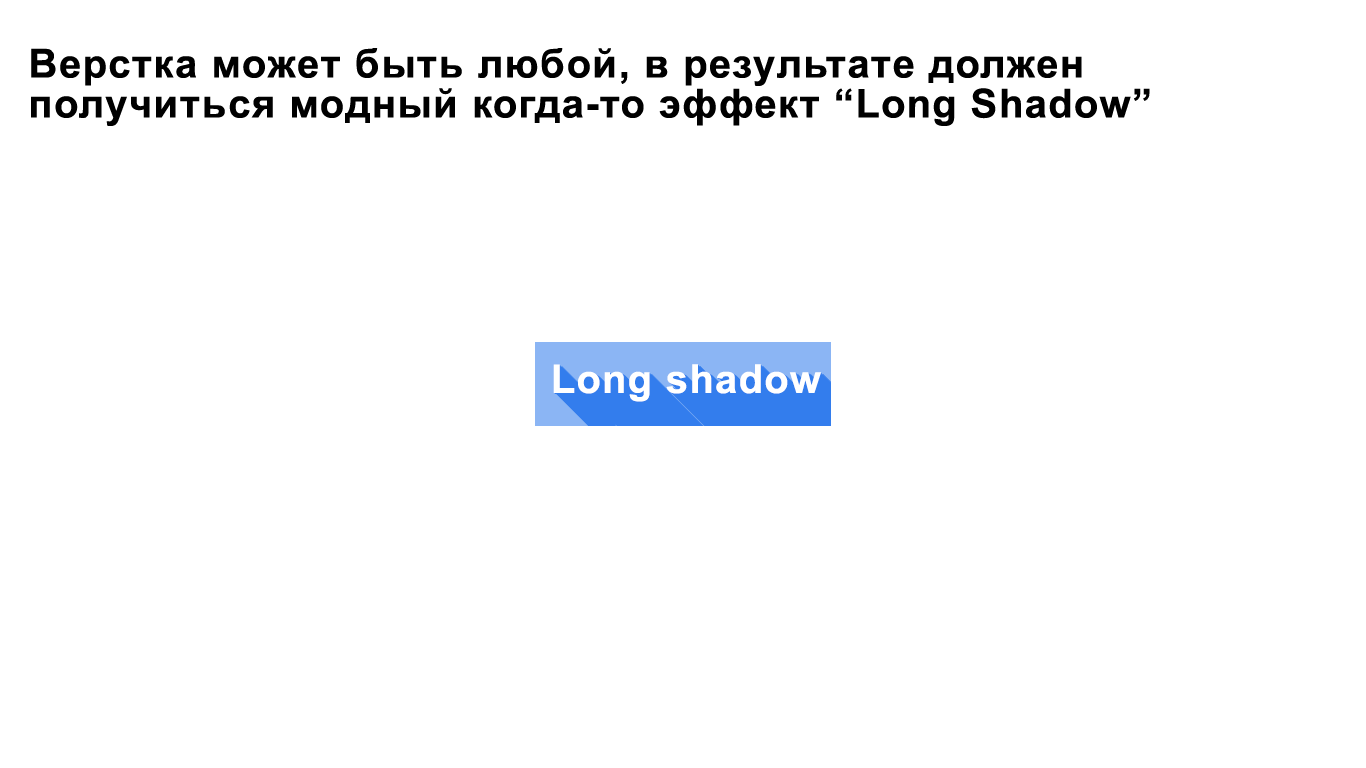
<style>
.page{position:relative;width:1366px;height:768px;background:#ffffff}
.page>*{position:absolute;margin:0}
.t1{font:40px/40px "Arial-BoldMT";letter-spacing:0.04em;color:#000000}
.t2{font:40px "Arial-BoldMT";letter-spacing:0.04em;color:#ffffff}
</style>
<div class="page">
<p class="t1" style="left:31px;top:48px;width:1119px;height:78px">Верстка может быть любой, в результате должен<br>получиться модный когда-то эффект “Long Shadow”</p>
<p class="t2" style="left:553px;top:364px;width:268px;height:38px">Long shadow</p>
</div>
